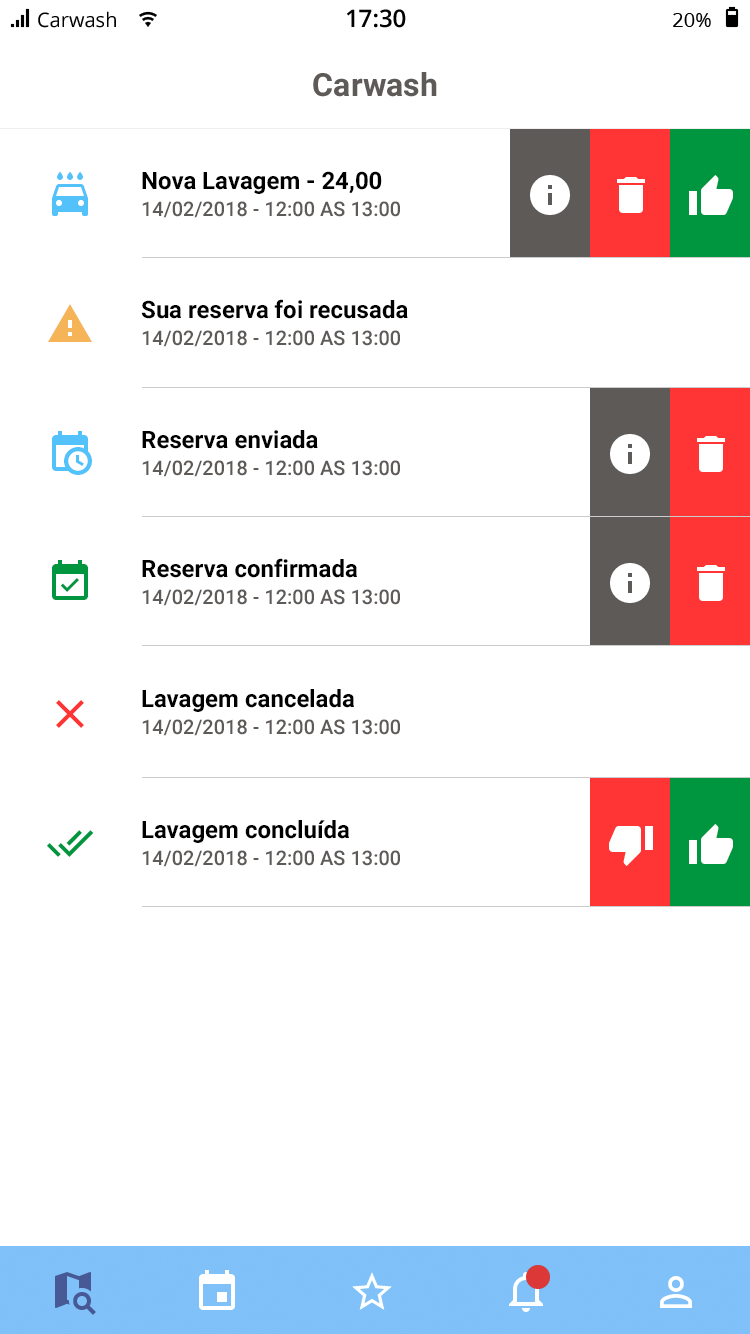
<style>
.page{position:relative;width:750px;height:1334px;background:#ffffff}
.page>*{position:absolute;margin:0}
.t1{font:24px "Roboto-Bold";color:#000000}
.t2{font:20px "Roboto-Medium";color:#5d5a58;text-transform:uppercase}
</style>
<div class="page">
<p class="t1" style="left:142px;top:171px;width:240px;height:23px">Nova Lavagem - 24,00</p>
<p class="t2" style="left:142px;top:201px;width:258px;height:17px">14/02/2018 - 12:00 as 13:00</p>
<p class="t1" style="left:141px;top:299px;width:267px;height:20px">Sua reserva foi recusada</p>
<p class="t2" style="left:142px;top:330px;width:258px;height:17px">14/02/2018 - 12:00 as 13:00</p>
<p class="t1" style="left:142px;top:430px;width:176px;height:19px">Reserva enviada</p>
<p class="t2" style="left:142px;top:460px;width:258px;height:17px">14/02/2018 - 12:00 as 13:00</p>
<p class="t1" style="left:142px;top:558px;width:215px;height:20px">Reserva confirmada</p>
<p class="t2" style="left:142px;top:589px;width:258px;height:17px">14/02/2018 - 12:00 as 13:00</p>
<p class="t1" style="left:142px;top:689px;width:212px;height:23px">Lavagem cancelada</p>
<p class="t2" style="left:142px;top:719px;width:258px;height:17px">14/02/2018 - 12:00 as 13:00</p>
<p class="t1" style="left:142px;top:820px;width:207px;height:23px">Lavagem concluída</p>
<p class="t2" style="left:142px;top:850px;width:258px;height:17px">14/02/2018 - 12:00 as 13:00</p>
</div>
